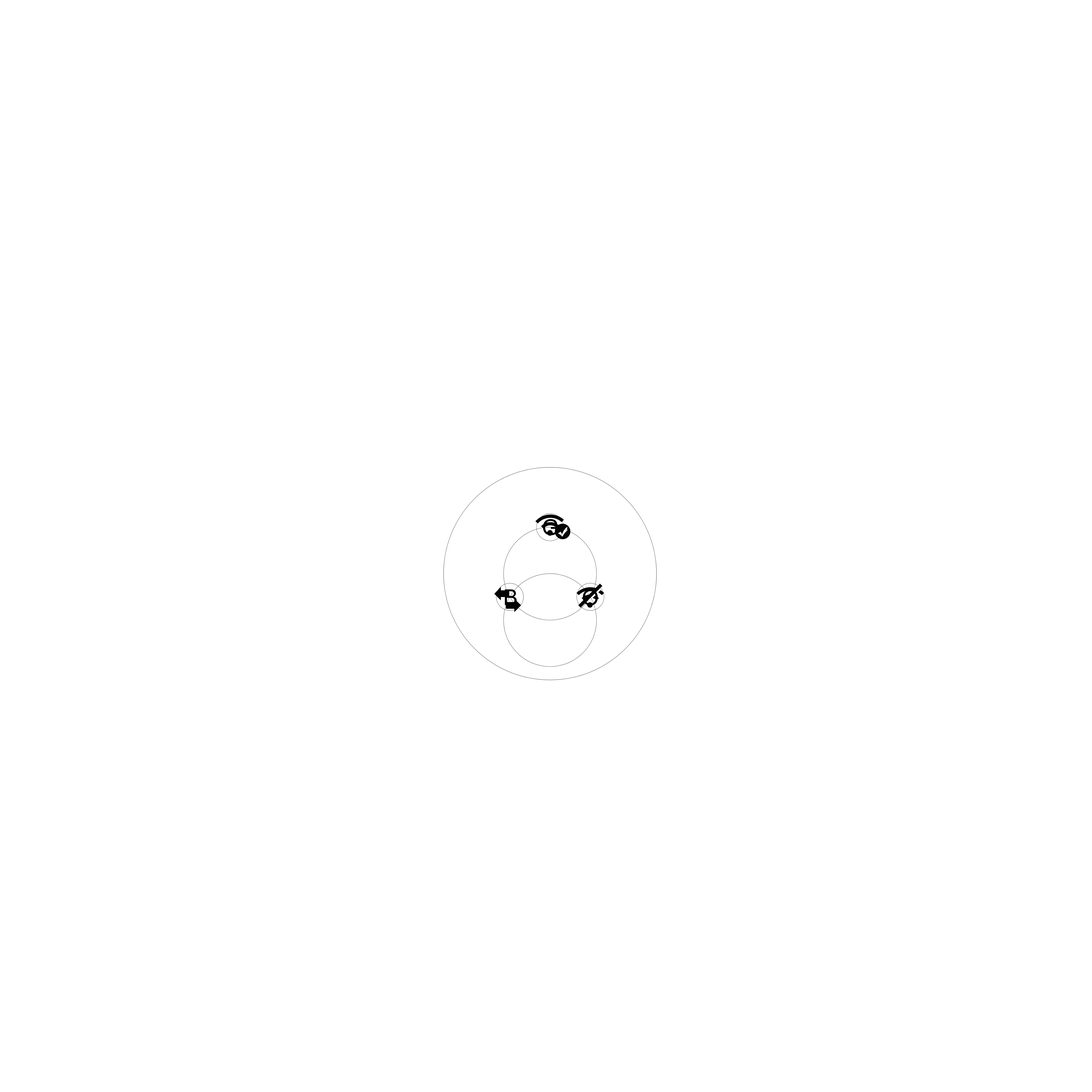
<style>
.page{position:relative;width:1092px;height:1092px;background:#ffffff}
.page>*{position:absolute;margin:0}
.t1{font:21.8px "ArialMT";color:#000000}
</style>
<div class="page">
<p class="t1" style="left:543px;top:519px;width:15px;height:16px">G</p>
<p class="t1" style="left:505px;top:589px;width:12px;height:16px">B</p>
<p class="t1" style="left:583px;top:589px;width:15px;height:17px">O</p>
</div>
